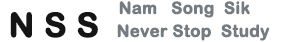
<style>
.page{position:relative;width:300px;height:42px;background:#ffffff}
.page>*{position:absolute;margin:0}
.t1{font:16.7px "ArialRoundedMTBold";color:#747c82;font-weight:bold}
.t2{font:33.3px "ArialRoundedMTBold";color:#161516;font-weight:bold}
</style>
<div class="page">
<p class="t1" style="left:119px;top:1px;width:131px;height:17px">Nam   Song  Sik</p>
<p class="t2" style="left:10px;top:12px;width:88px;height:26px">N S S</p>
<p class="t1" style="left:117px;top:24px;width:153px;height:17px">Never Stop  Study</p>
</div>
